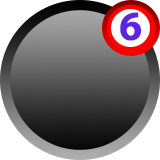
<style>
.page{position:relative;width:160px;height:160px}
.page>*{position:absolute;margin:0}
.t1{font:41.7px "MyriadPro-Bold";color:#5e24e2}
</style>
<div class="page">
<p class="t1" style="left:120px;top:12px;width:22px;height:29px">6</p>
</div>
